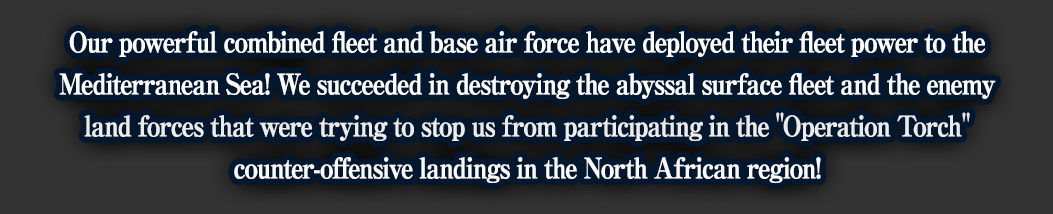
<style>
.page{position:relative;width:1053px;height:214px;background:#03172f}
.page>*{position:absolute;margin:0}
.t1{font:28px/42px "RyuminPro-ExBold";letter-spacing:-0.08em;color:#ffffff;font-weight:bold;scale:0.9 1}
</style>
<div class="page">
<p class="t1" style="left:59px;top:31px;width:937px;height:152px;text-align:center">Our powerful combined fleet and base air force have deployed their fleet power to the<br>Mediterranean Sea! We succeeded in destroying the abyssal surface fleet and the enemy<br>land forces that were trying to stop us from participating in the "Operation Torch"<br>counter-offensive landings in the North African region!</p>
</div>
